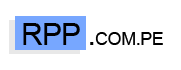
<style>
.page{position:relative;width:181px;height:70px;background:#ffffff}
.page>*{position:absolute;margin:0}
.t1{font:18px "ArialMT";letter-spacing:-0.025em;color:#000000}
.t2{font:30px "ArialMT";letter-spacing:-0.025em;color:#000000}
</style>
<div class="page">
<p class="t1" style="left:23px;top:23px;width:140px;height:22px"><span class="t2">RPP .</span>COM.PE</p>
</div>
